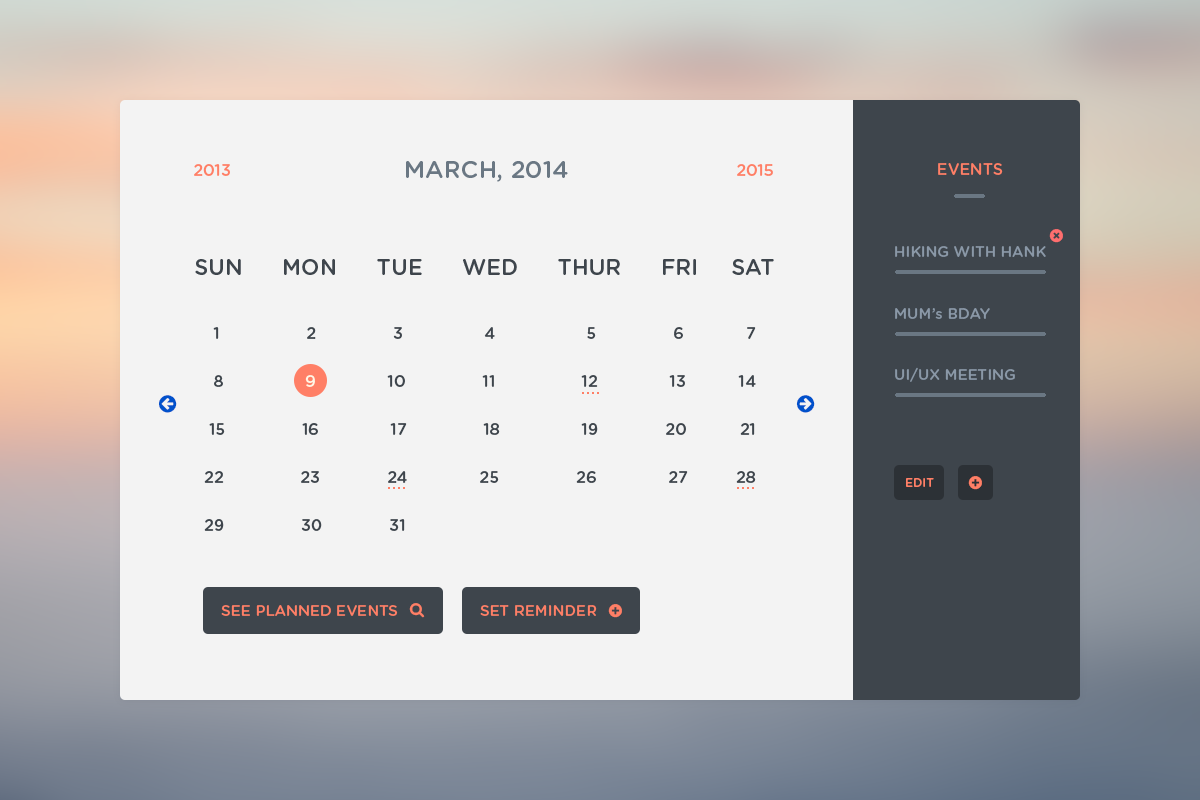
<style>
.page{position:relative;width:1200px;height:800px;background:#f3f3f3}
.page>*{position:absolute;margin:0}
.t1{font:24px "GothamRounded-Medium";color:#6a7783}
.t2{font:16px "GothamRounded-Medium";color:#ff7f66}
.t3{font:15px "GothamRounded-Medium";color:#8a98a7}
.t4{font:22px "GothamRounded-Medium";color:#3e454c}
.t5{font:16px/48px "GothamRounded-Medium";color:#3e454c}
.t6{font:16px/48px "GothamRounded-Medium";color:#fff6e6}
.t7{font:12px "GothamRounded-Medium";color:#ff7f66}
.t8{font:15px "GothamRounded-Medium";color:#ff7f66}
</style>
<div class="page">
<p class="t1" style="left:406px;top:161px;width:162px;height:21px">MARCH, 2014</p>
<p class="t2" style="left:194px;top:164px;width:36px;height:12px">2013</p>
<p class="t2" style="left:737px;top:164px;width:36px;height:12px">2015</p>
<p class="t2" style="left:938px;top:163px;width:65px;height:12px">EVENTS</p>
<p class="t3" style="left:895px;top:246px;width:151px;height:11px">HIKING WITH HANK</p>
<p class="t4" style="left:195px;top:259px;width:579px;height:16px">SUN      MON      TUE      WED      THUR      FRI     SAT</p>
<p class="t3" style="left:895px;top:308px;width:95px;height:11px">MUM’s BDAY</p>
<p class="t5" style="left:204px;top:327px;width:552px;height:204px">1                  2                3                 4                   5                6             7<br>    8                 <span class="t6">9</span>               10                11                  12               13           14<br>   15                16               17                18                 19              20           21<br>  22                23              24               25                26               27          28<br>  29                30              31</p>
<p class="t3" style="left:895px;top:367px;width:120px;height:15px">UI/UX MEETING</p>
<p class="t7" style="left:906px;top:478px;width:28px;height:9px">EDIT</p>
<p class="t8" style="left:221px;top:605px;width:177px;height:11px">SEE PLANNED EVENTS</p>
<p class="t8" style="left:480px;top:605px;width:117px;height:11px">SET REMINDER</p>
</div>
